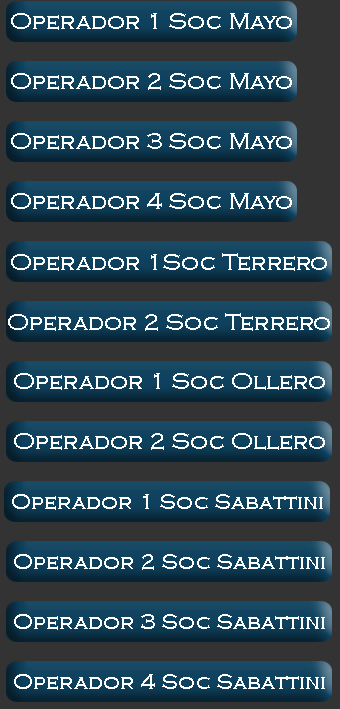
<style>
.page{position:relative;width:340px;height:709px;background:#333333}
.page>*{position:absolute;margin:0}
.t1{font:24px "CopperplateGothic-Light";color:#ffffff}
.t2{font:22px "CopperplateGothic-Light";color:#ffffff}
</style>
<div class="page">
<p class="t1" style="left:11px;top:13px;width:281px;height:17px">Operador 1 Soc Mayo</p>
<p class="t1" style="left:11px;top:73px;width:281px;height:17px">Operador 2 Soc Mayo</p>
<p class="t1" style="left:11px;top:133px;width:281px;height:17px">Operador 3 Soc Mayo</p>
<p class="t1" style="left:11px;top:193px;width:281px;height:17px">Operador 4 Soc Mayo</p>
<p class="t1" style="left:11px;top:253px;width:316px;height:18px">Operador 1Soc Terrero</p>
<p class="t1" style="left:8px;top:313px;width:322px;height:18px">Operador 2 Soc Terrero</p>
<p class="t1" style="left:14px;top:373px;width:311px;height:17px">Operador 1 Soc Ollero</p>
<p class="t1" style="left:14px;top:433px;width:311px;height:17px">Operador 2 Soc Ollero</p>
<p class="t2" style="left:12px;top:494px;width:311px;height:16px">Operador 1 Soc Sabattini</p>
<p class="t2" style="left:14px;top:554px;width:311px;height:16px">Operador 2 Soc Sabattini</p>
<p class="t2" style="left:14px;top:614px;width:311px;height:16px">Operador 3 Soc Sabattini</p>
<p class="t2" style="left:14px;top:674px;width:311px;height:16px">Operador 4 Soc Sabattini</p>
</div>
